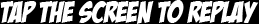
<style>
.page{position:relative;width:259px;height:24px;background:#ffffff}
.page>*{position:absolute;margin:0}
.t1{font:30px "BadaBoomBB";color:#ffffff}
</style>
<div class="page">
<p class="t1" style="left:0px;top:0px;width:259px;height:24px">Tap the Screen to Replay</p>
</div>
